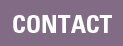
<style>
.page{position:relative;width:123px;height:46px;background:#826c85}
.page>*{position:absolute;margin:0}
.t1{font:25px "Univers-CondensedBold";color:#ffffff}
</style>
<div class="page">
<p class="t1" style="left:13px;top:15px;width:99px;height:18px">CONTACT</p>
</div>
